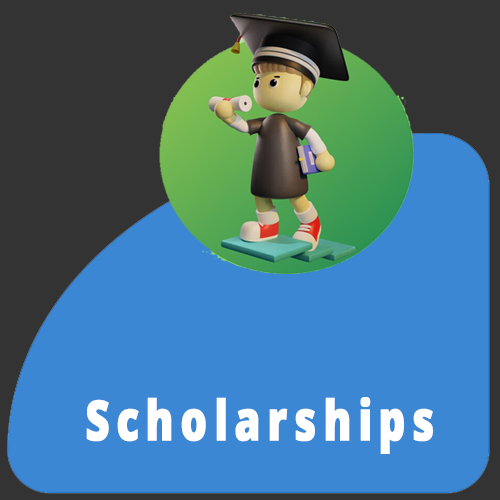
<style>
.page{position:relative;width:500px;height:500px;background:#3b87d4}
.page>*{position:absolute;margin:0}
.t1{font:55.5px "OpenSans-ExtraBold";letter-spacing:0.15em;color:#ffffff;font-weight:bold;scale:0.74 1}
</style>
<div class="page">
<p class="t1" style="left:86px;top:397px;width:347px;height:57px">Scholarships</p>
</div>
